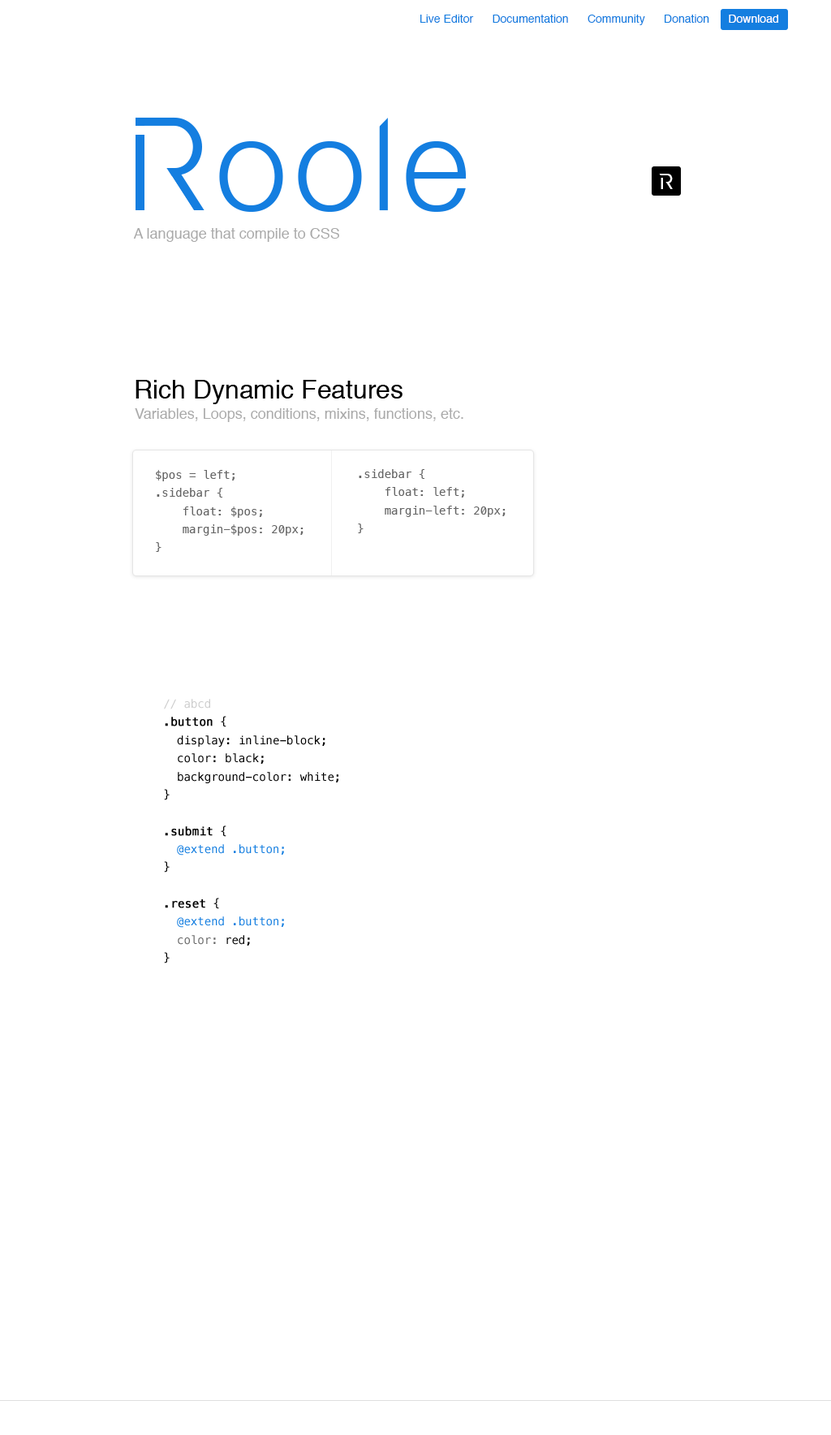
<style>
.page{position:relative;width:831px;height:1435px;background:#ffffff}
.page>*{position:absolute;margin:0}
.t1{font:11.4px "Helvetica";color:#147ee0}
.t2{font:11.4px "Helvetica";color:#ffffff}
.t3{font:129.9px "HelveticaNeue-Light";letter-spacing:0.045em;color:#147ee0}
.t4{font:129.9px "Raleway-Regular";letter-spacing:0.045em;color:#147ee0}
.t5{font:21.1px "Raleway-Medium";letter-spacing:0.045em;color:#ffffff}
.t6{font:14.6px "Helvetica";color:#aaaaaa}
.t7{font:26px "Helvetica";color:#000000}
.t8{font:11.4px "Menlo-Regular";color:#666666}
.t9{font:11.4px "Menlo-Regular";color:#000000}
.t10{font:11.4px "Menlo-Regular";color:#cccccc}
.t11{font:11.4px "Menlo-Regular";color:#000000;font-weight:bold}
.t12{font:11.4px "Menlo-Regular";color:#147ee0}
</style>
<div class="page">
<p class="t1" style="left:420px;top:15px;width:358px;height:10px">Live Editor      Documentation      Community      Donation   <span class="t2">   Download</span></p>
<p class="t3" style="left:136px;top:117px;width:331px;height:95px"><span class="t4">R</span>oole</p>
<p class="t5" style="left:661px;top:174px;width:12px;height:15px">R</p>
<p class="t6" style="left:133px;top:228px;width:206px;height:14px">A language that compile to CSS</p>
<p class="t7" style="left:136px;top:380px;width:267px;height:24px">Rich Dynamic Features</p>
<p class="t6" style="left:135px;top:408px;width:328px;height:14px">Variables, Loops, conditions, mixins, functions, etc.</p>
<p class="t8" style="left:156px;top:470px;width:148px;height:82px">$pos = left;<br>.sidebar {<br>    float: $pos;<br>    margin-$pos: 20px;<br>}</p>
<p class="t8" style="left:358px;top:469px;width:148px;height:64px">.sidebar {<br>    float: left;<br>    margin-left: 20px;<br>}</p>
<p class="t9" style="left:164px;top:699px;width:174px;height:264px"><span class="t10">// abcd<br></span><span class="t11">.button</span> {<br>  display: inline-block;<br>  color: black;<br>  background-color: white;<br>}<br><br><span class="t11">.submit</span> {<br>  <span class="t12">@extend .button;<br></span>}<br><br><span class="t11">.reset</span> {<br>  <span class="t12">@extend .button;<br>  </span><span class="t8">color:</span> red;<br>}</p>
</div>
